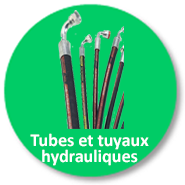
<style>
.page{position:relative;width:185px;height:185px;background:#00cc66}
.page>*{position:absolute;margin:0}
.t1{font:18px/16px "Calibri-Bold";color:#ffffff}
</style>
<div class="page">
<p class="t1" style="left:30px;top:133px;width:119px;height:33px;text-align:center">Tubes et tuyaux  <br>hydrauliques</p>
</div>
